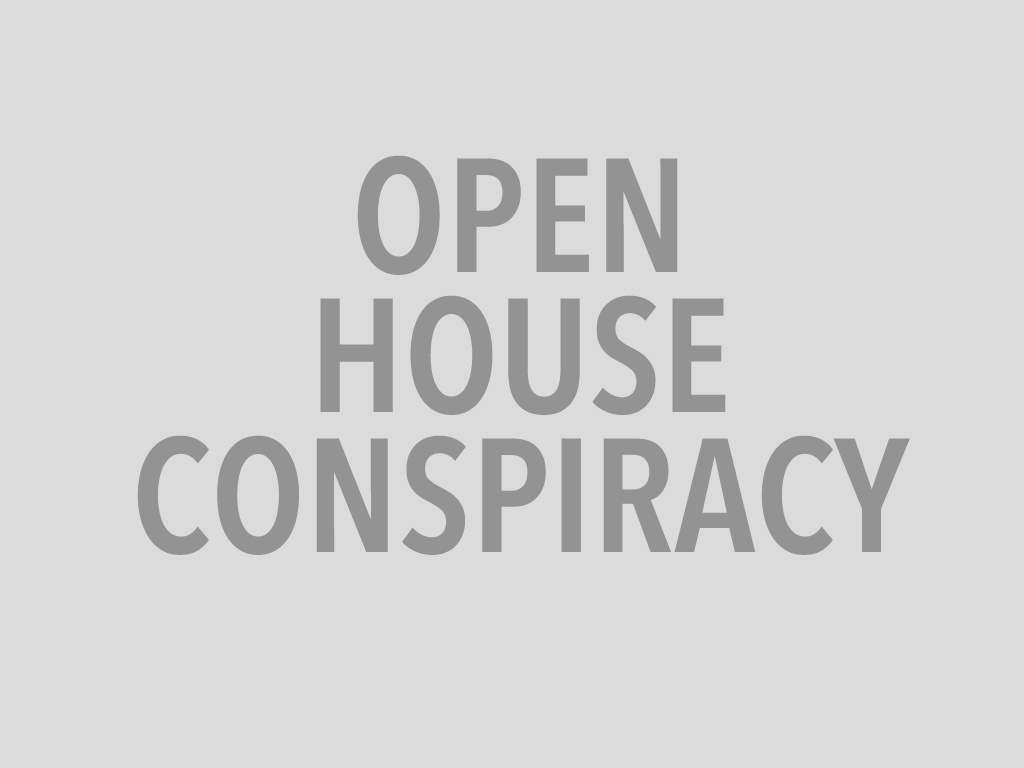
<style>
.page{position:relative;width:1024px;height:768px;background:#dbdbdb}
.page>*{position:absolute;margin:0}
.t1{font:160px/140px "AvenirNextCondensed-DemiBold";color:#939393}
</style>
<div class="page">
<p class="t1" style="left:137px;top:155px;width:773px;height:400px;text-align:center">OPEN<br>HOUSE<br>CONSPIRACY</p>
</div>
